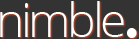
<style>
.page{position:relative;width:139px;height:39px;background:#333333}
.page>*{position:absolute;margin:0}
.t1{font:48px "OpenSans-Light";letter-spacing:-0.05em;color:#ffffff}
.t2{font:72px "Georgia";letter-spacing:-0.05em;color:#ffffff}
</style>
<div class="page">
<p class="t1" style="left:0px;top:1px;width:137px;height:37px">nimble<span class="t2">.</span></p>
</div>
